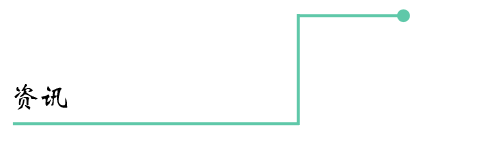
<style>
.page{position:relative;width:500px;height:144px;background:#ffffff}
.page>*{position:absolute;margin:0}
.t1{font:30px "STXinwei";color:#000000}
</style>
<div class="page">
<p class="t1" style="left:14px;top:84px;width:54px;height:26px">资讯</p>
</div>
